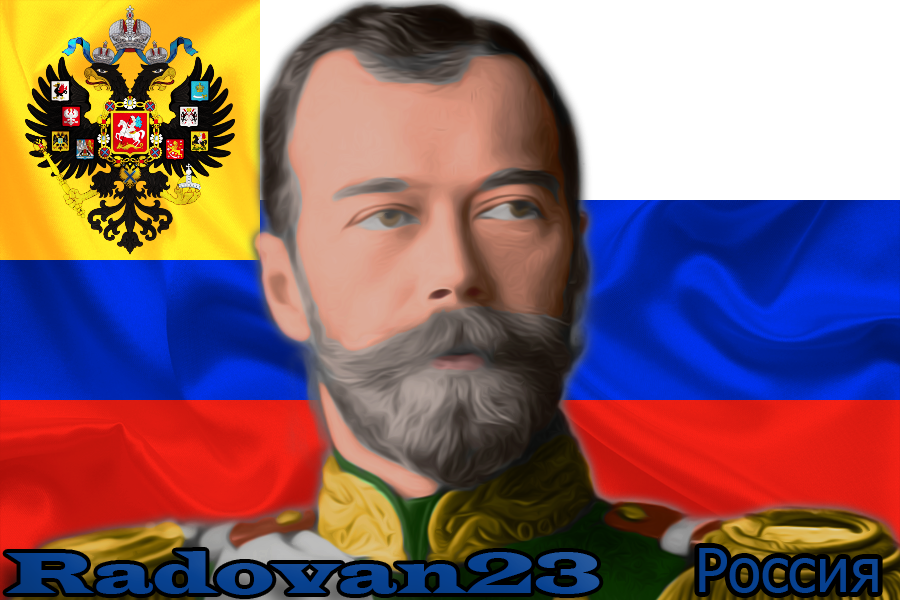
<style>
.page{position:relative;width:900px;height:600px}
.page>*{position:absolute;margin:0}
.t1{font:60px "LatinWide";color:#074190}
.t2{font:60px "Tahoma";color:#074190}
</style>
<div class="page">
<p class="t1" style="left:6px;top:551px;width:594px;height:44px">Radovan23</p>
<p class="t2" style="left:699px;top:548px;width:179px;height:45px">Россия</p>
</div>
